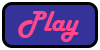
<style>
.page{position:relative;width:100px;height:50px;background:#333399}
.page>*{position:absolute;margin:0}
.t1{font:30px "HarlowSolid";color:#ff478b}
</style>
<div class="page">
<p class="t1" style="left:18px;top:11px;width:61px;height:31px">Play</p>
</div>
